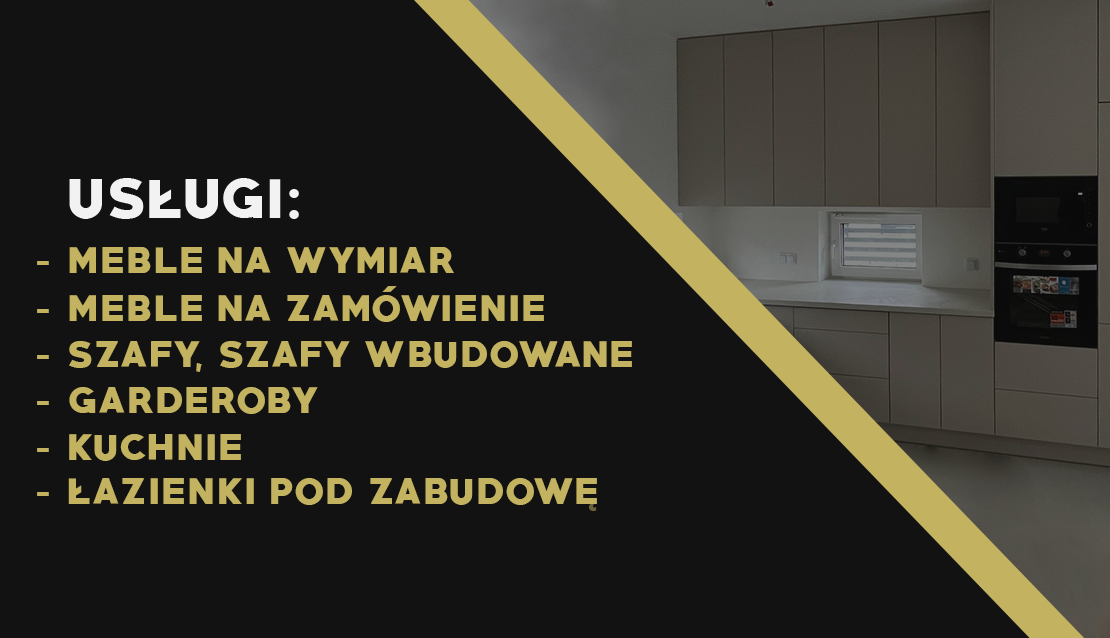
<style>
.page{position:relative;width:1110px;height:638px;background:#121212}
.page>*{position:absolute;margin:0}
.t1{font:33.3px "PRIMETIME-Regular";letter-spacing:0.05em;color:#c3b260}
</style>
<div class="page">
<p class="t1" style="left:37px;top:247px;width:417px;height:26px">- MEBLE NA WYMIAR</p>
<p class="t1" style="left:37px;top:295px;width:507px;height:27px">- MEBLE NA ZAMOWIENIE</p>
<p class="t1" style="left:37px;top:341px;width:595px;height:31px">- SZAFY, SZAFY WBUDOWANE</p>
<p class="t1" style="left:37px;top:387px;width:281px;height:27px">- GARDEROBY</p>
<p class="t1" style="left:37px;top:434px;width:204px;height:27px">- KUCHNIE</p>
<p class="t1" style="left:37px;top:478px;width:560px;height:27px">- LAZIENKI POD ZABUDOWE</p>
</div>
